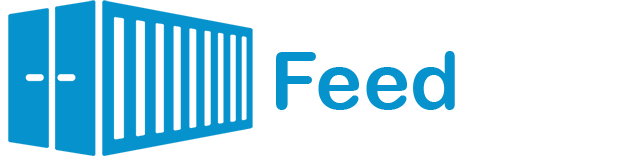
<style>
.page{position:relative;width:640px;height:160px;background:#ffffff}
.page>*{position:absolute;margin:0}
.t1{font:80px "ArialRoundedMTBold";color:#0692cc}
.t2{font:80px "ArialRoundedMTBold";color:#ffffff}
</style>
<div class="page">
<p class="t1" style="left:276px;top:51px;width:339px;height:59px">Feed<span class="t2">ster</span></p>
</div>
